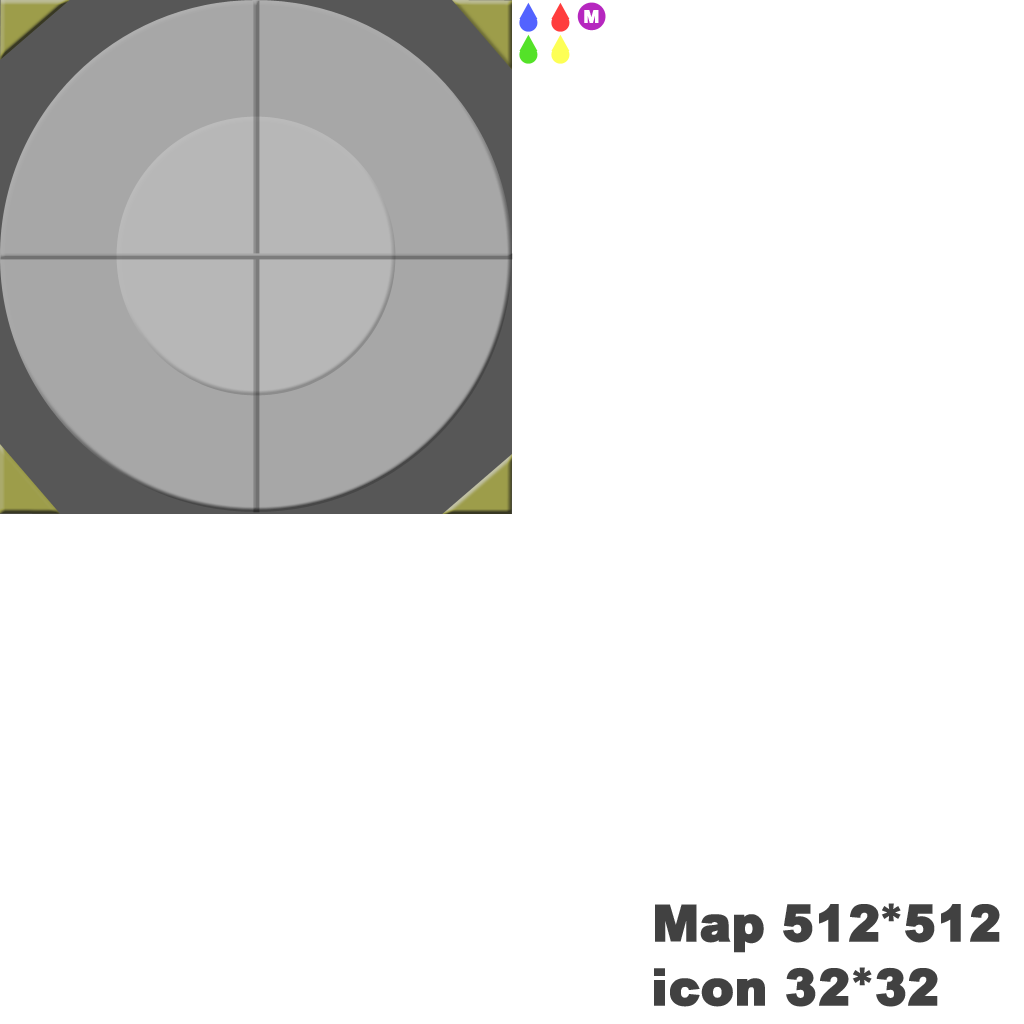
<style>
.page{position:relative;width:1024px;height:1024px;background:#ffffff}
.page>*{position:absolute;margin:0}
.t1{font:18.6px "DHPGothic-EB-WIN-RKSJ-H";color:#ffffff}
.t2{font:53.4px/64.1px "DHPGothic-EB-WIN-RKSJ-H";color:#414141}
</style>
<div class="page">
<p class="t1" style="left:584px;top:10px;width:15px;height:13px">M</p>
<p class="t2" style="left:654px;top:903px;width:346px;height:104px">Map 512*512<br>icon 32*32</p>
</div>
